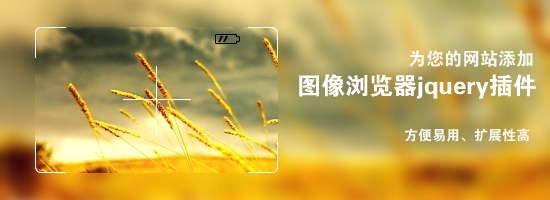
<style>
.page{position:relative;width:550px;height:200px}
.page>*{position:absolute;margin:0}
.t1{font:18px "FZDHTJW--GB1-0";color:#ffffff}
.t2{font:24px "FZDHTJW--GB1-0";color:#ffffff}
.t3{font:14px "FZDHTJW--GB1-0";color:#ffffff}
</style>
<div class="page">
<p class="t1" style="left:409px;top:50px;width:124px;height:17px;opacity:0.9">为您的网站添加</p>
<p class="t2" style="left:299px;top:74px;width:237px;height:25px">图像浏览器jquery插件</p>
<p class="t3" style="left:405px;top:128px;width:125px;height:14px;opacity:0.9">方便易用、扩展性高</p>
</div>
